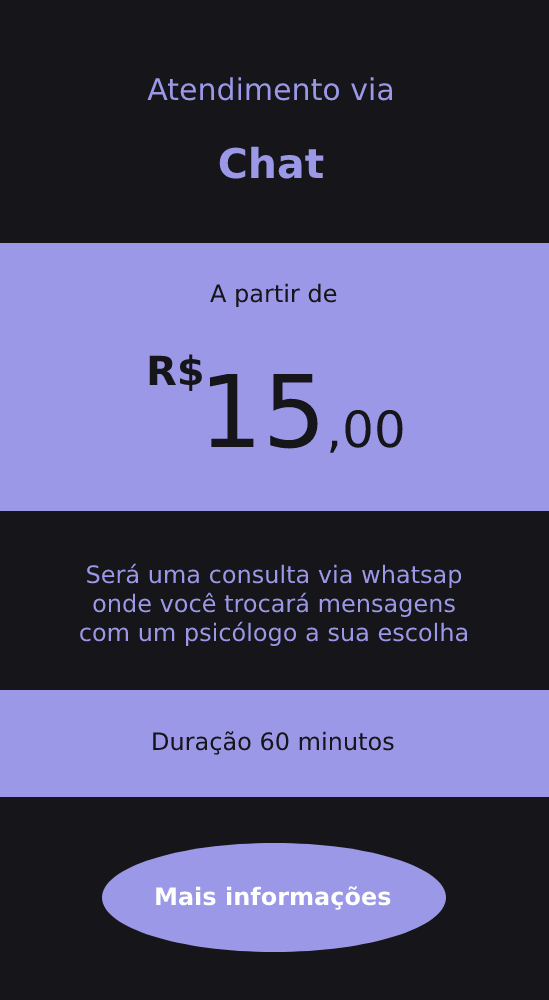
<style>
.page{position:relative;width:549px;height:1000px;background:#16151a}
.page>*{position:absolute;margin:0}
.t1{font:30px "DejaVuSans";color:#9b98e7}
.t2{font:41px "DejaVuSans-Bold";color:#9b98e7}
.t3{font:24px "DejaVuSans";color:#16151a}
.t4{font:40px "DejaVuSans-Bold";color:#16151a}
.t5{font:50px "DejaVuSans";color:#16151a}
.t6{font:100px "DejaVuSans";color:#16151a}
.t7{font:24px "DejaVuSans";color:#9b98e7}
.t8{font:24px "DejaVuSans-Bold";color:#ffffff}
</style>
<div class="page">
<p class="t1" style="left:147px;top:77px;width:245px;height:102px;text-align:center">Atendimento via<br><br><span class="t2">Chat</span></p>
<p class="t3" style="left:210px;top:283px;width:127px;height:24px">A partir de</p>
<p class="t4" style="left:149px;top:354px;width:53px;height:37px">R$</p>
<p class="t5" style="left:209px;top:374px;width:194px;height:79px"><span class="t6">15</span>,00</p>
<p class="t7" style="left:80px;top:563px;width:388px;height:83px;text-align:center">Será uma consulta via whatsap<br>onde você trocará mensagens<br>com um psicólogo a sua escolha</p>
<p class="t3" style="left:153px;top:731px;width:241px;height:24px">Duração 60 minutos</p>
<p class="t8" style="left:156px;top:886px;width:235px;height:24px">Mais informações</p>
</div>
